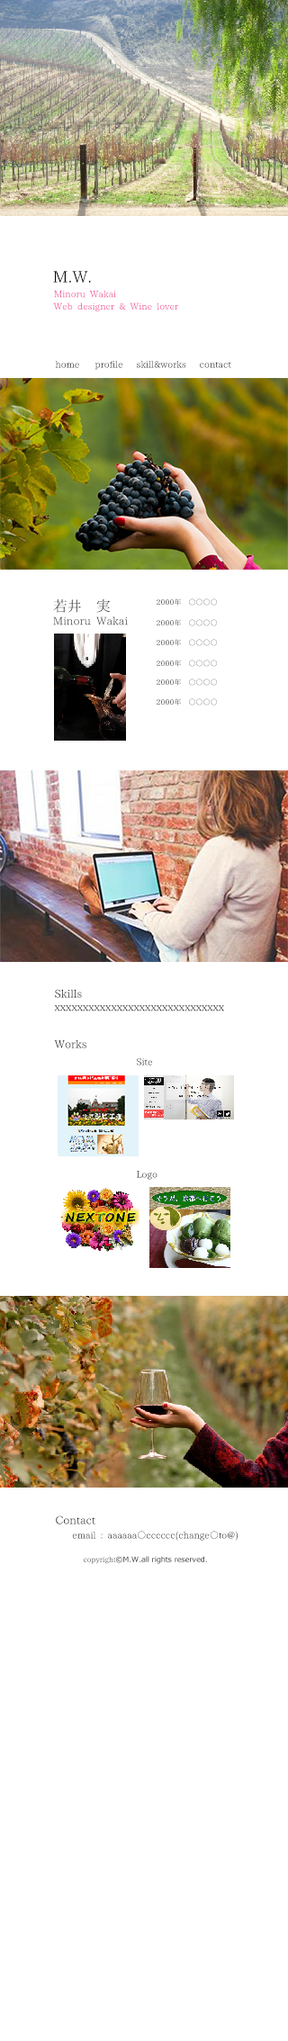
<style>
.page{position:relative;width:288px;height:2041px;background:#ffffff}
.page>*{position:absolute;margin:0}
.t1{font:16.2px "02UtsukushiMincho";letter-spacing:0.004em;color:#000000}
.t2{font:9px "02UtsukushiMincho";letter-spacing:0.004em;color:#f1368e}
.t3{font:9px "02UtsukushiMincho";letter-spacing:0.004em}
.t4{font:14.4px "02UtsukushiMincho";letter-spacing:0.004em;color:#333333}
.t5{font:7.2px "02UtsukushiMincho";letter-spacing:0.004em}
.t6{font:10.8px "02UtsukushiMincho";letter-spacing:0.004em;color:#333333}
.t7{font:10.8px "02UtsukushiMincho";letter-spacing:0.004em;color:#000000}
.t8{font:10.8px "02UtsukushiMincho";letter-spacing:0.004em}
.t9{font:7.2px "Meiryo";letter-spacing:0.004em}
</style>
<div class="page">
<p class="t1" style="left:53px;top:271px;width:38px;height:12px">M.W.</p>
<p class="t2" style="left:54px;top:291px;width:62px;height:7px">Minoru Wakai</p>
<p class="t3" style="left:53px;top:302px;width:125px;height:9px">Web designer &amp; Wine lover</p>
<p class="t3" style="left:55px;top:361px;width:24px;height:7px">home</p>
<p class="t3" style="left:94px;top:361px;width:28px;height:9px">profile</p>
<p class="t3" style="left:137px;top:361px;width:49px;height:7px">skill&amp;works</p>
<p class="t3" style="left:200px;top:362px;width:31px;height:6px">contact</p>
<p class="t4" style="left:53px;top:599px;width:57px;height:14px">若井　実</p>
<p class="t5" style="left:157px;top:598px;width:60px;height:8px">2000年　○○○○</p>
<p class="t6" style="left:53px;top:616px;width:75px;height:10px">Minoru Wakai</p>
<p class="t5" style="left:157px;top:619px;width:60px;height:7px">2000年　○○○○</p>
<p class="t5" style="left:157px;top:639px;width:60px;height:7px">2000年　○○○○</p>
<p class="t5" style="left:157px;top:660px;width:60px;height:7px">2000年　○○○○</p>
<p class="t5" style="left:157px;top:679px;width:60px;height:7px">2000年　○○○○</p>
<p class="t5" style="left:157px;top:698px;width:60px;height:8px">2000年　○○○○</p>
<p class="t7" style="left:55px;top:989px;width:27px;height:9px">Skills</p>
<p class="t8" style="left:54px;top:1005px;width:170px;height:7px">xxxxxxxxxxxxxxxxxxxxxxxxxxxxxx</p>
<p class="t8" style="left:54px;top:1040px;width:32px;height:8px">Works</p>
<p class="t3" style="left:137px;top:1058px;width:15px;height:8px">Site</p>
<p class="t3" style="left:137px;top:1171px;width:21px;height:9px">Logo</p>
<p class="t8" style="left:56px;top:1516px;width:39px;height:9px">Contact</p>
<p class="t3" style="left:72px;top:1531px;width:166px;height:10px">email : aaaaaa○cccccc(change○to@)</p>
<p class="t9" style="left:84px;top:1556px;width:123px;height:8px"><span class="t5">copyright</span>©M.W.all rights reserved.</p>
</div>
